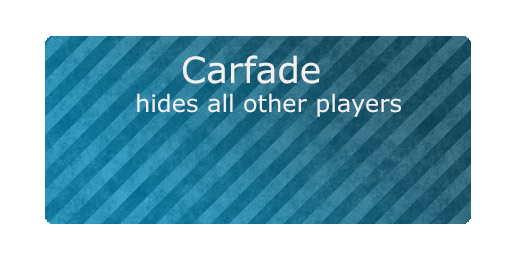
<style>
.page{position:relative;width:512px;height:256px;background:#ffffff}
.page>*{position:absolute;margin:0}
.t1{font:36px "Verdana";color:#f0f0f0}
.t2{font:24px "Verdana";color:#f0f0f0}
</style>
<div class="page">
<p class="t1" style="left:183px;top:55px;width:137px;height:29px">Carfade</p>
<p class="t2" style="left:137px;top:93px;width:264px;height:24px">hides all other players</p>
</div>
